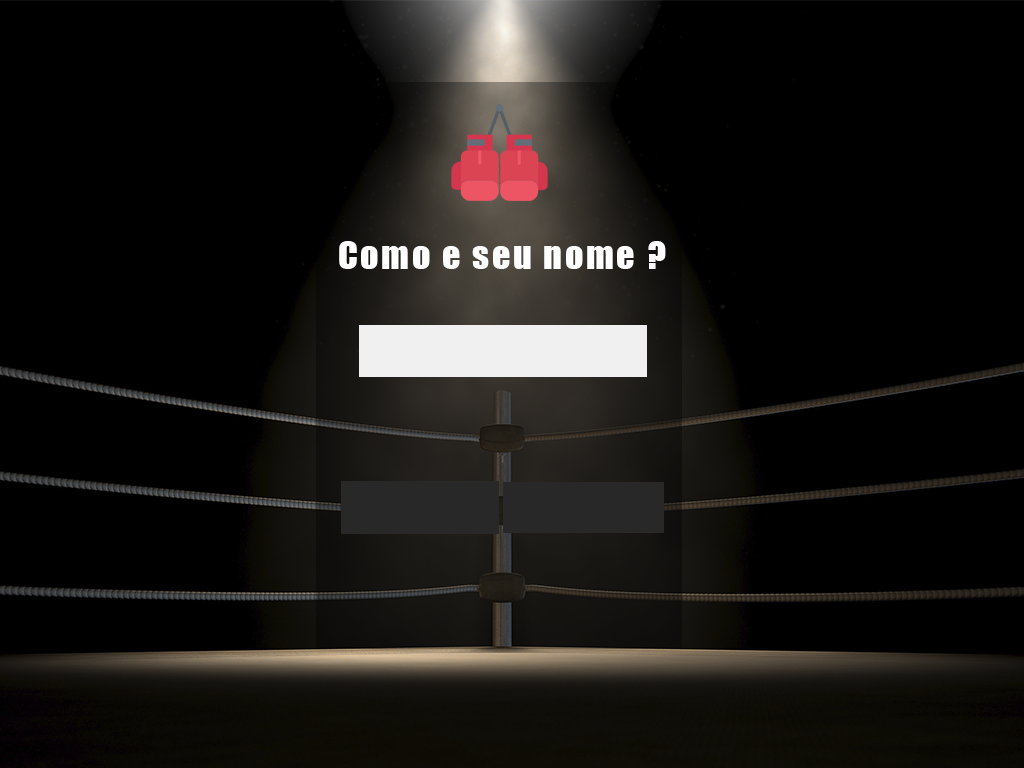
<style>
.page{position:relative;width:1024px;height:768px;background:#000000}
.page>*{position:absolute;margin:0}
.t1{font:36px "Impact";letter-spacing:0.075em;color:#fffefe}
</style>
<div class="page">
<p class="t1" style="left:339px;top:241px;width:327px;height:28px">Como e seu nome ?</p>
</div>
